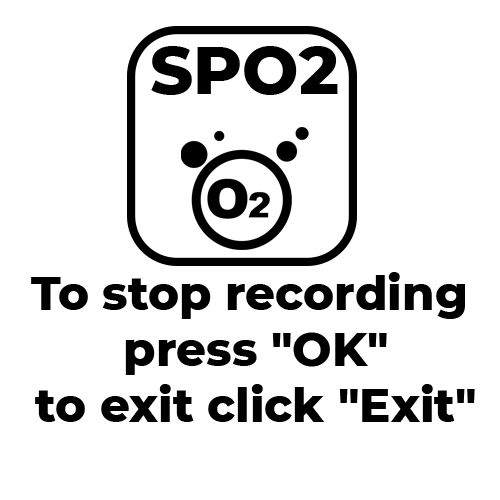
<style>
.page{position:relative;width:500px;height:500px;background:#ffffff}
.page>*{position:absolute;margin:0}
.t1{font:66.7px "Montserrat-ExtraBold";color:#000000}
.t2{font:46.7px "Montserrat-ExtraBold";color:#000000}
</style>
<div class="page">
<p class="t1" style="left:151px;top:46px;width:187px;height:49px">SPO2</p>
<p class="t2" style="left:31px;top:272px;width:444px;height:150px;text-align:center">To stop recording<br> press "OK"<br> to exit click "Exit"</p>
</div>
